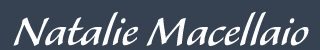
<style>
.page{position:relative;width:320px;height:50px;background:#364252}
.page>*{position:absolute;margin:0}
.t1{font:50px "AlexaStd";color:#ffffff}
</style>
<div class="page">
<p class="t1" style="left:13px;top:11px;width:296px;height:35px">Natalie Macellaio</p>
</div>
